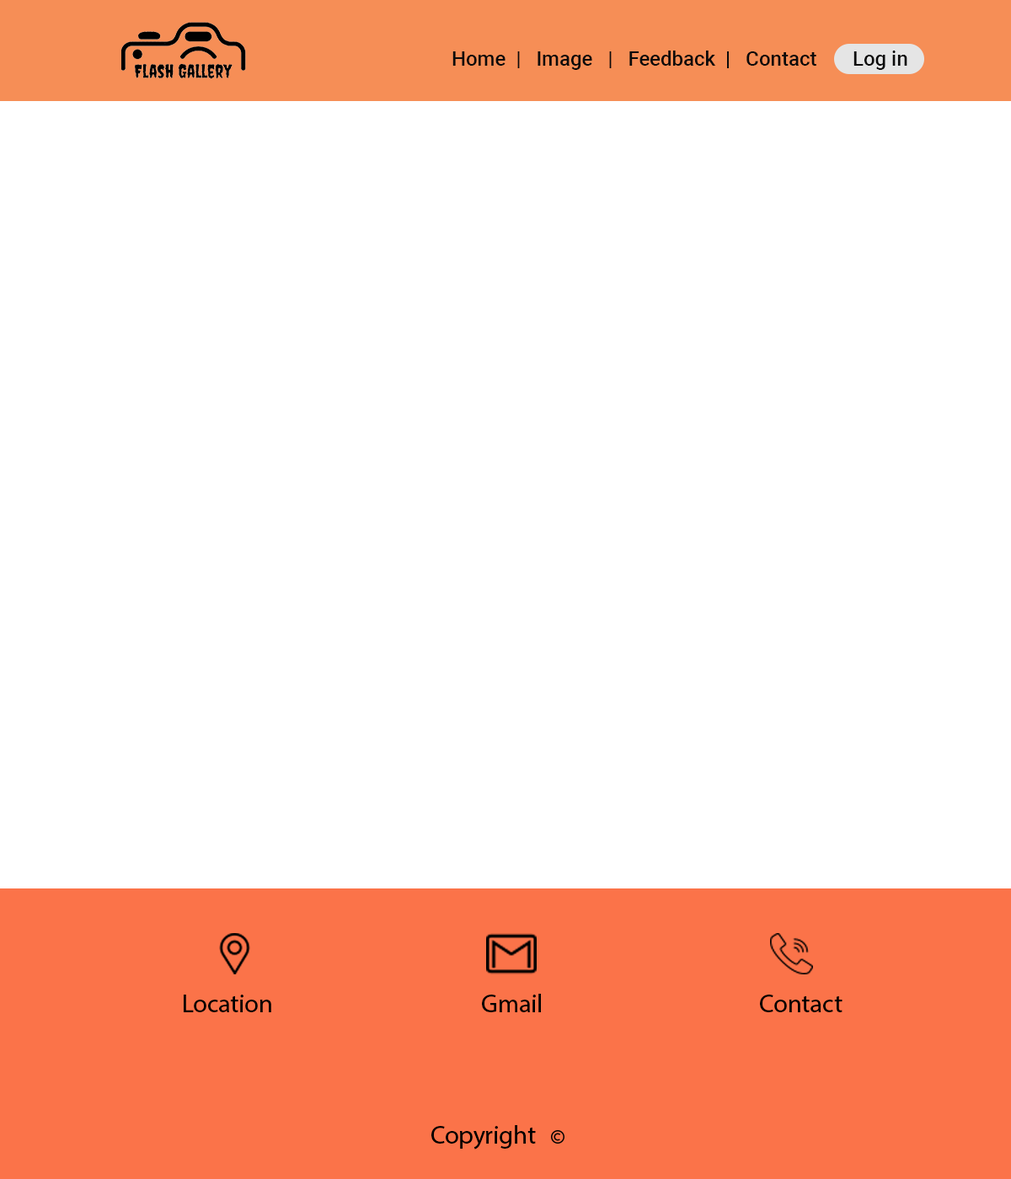
<style>
.page{position:relative;width:1011px;height:1179px;background:#ffffff}
.page>*{position:absolute;margin:0}
.t1{font:20.2px "Roboto-Medium";color:#0c0b0b}
.t2{font:25.3px "MyriadHebrew-Regular";color:#000000}
.t3{font:25.5px "MyriadHebrew-Regular";color:#000000}
</style>
<div class="page">
<p class="t1" style="left:452px;top:51px;width:364px;height:19px">Home  |   Image   |   Feedback  |   Contact</p>
<p class="t1" style="left:853px;top:51px;width:54px;height:19px">Log in</p>
<p class="t2" style="left:184px;top:995px;width:87px;height:18px">Location</p>
<p class="t2" style="left:482px;top:994px;width:59px;height:19px">Gmail</p>
<p class="t2" style="left:760px;top:995px;width:82px;height:18px">Contact</p>
<p class="t3" style="left:431px;top:1126px;width:105px;height:24px">Copyright</p>
</div>
